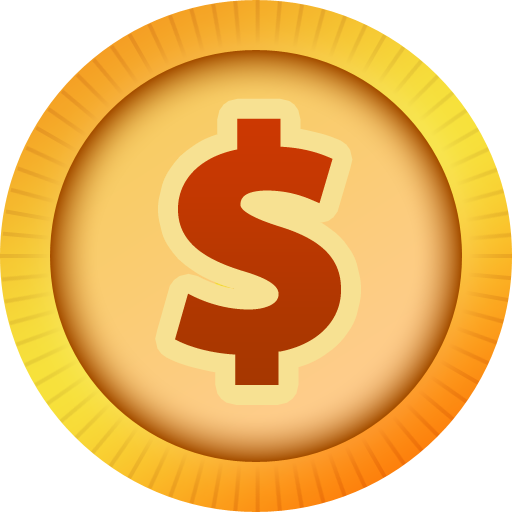
<style>
.page{position:relative;width:512px;height:512px;background:#ffffff}
.page>*{position:absolute;margin:0}
.t1{font:315px "Myriad-Bold";letter-spacing:-0.3em;color:#b93801;font-weight:bold;scale:1.11 1}
</style>
<div class="page">
<p class="t1" style="left:132px;top:90px;width:262px;height:285px">$</p>
</div>
